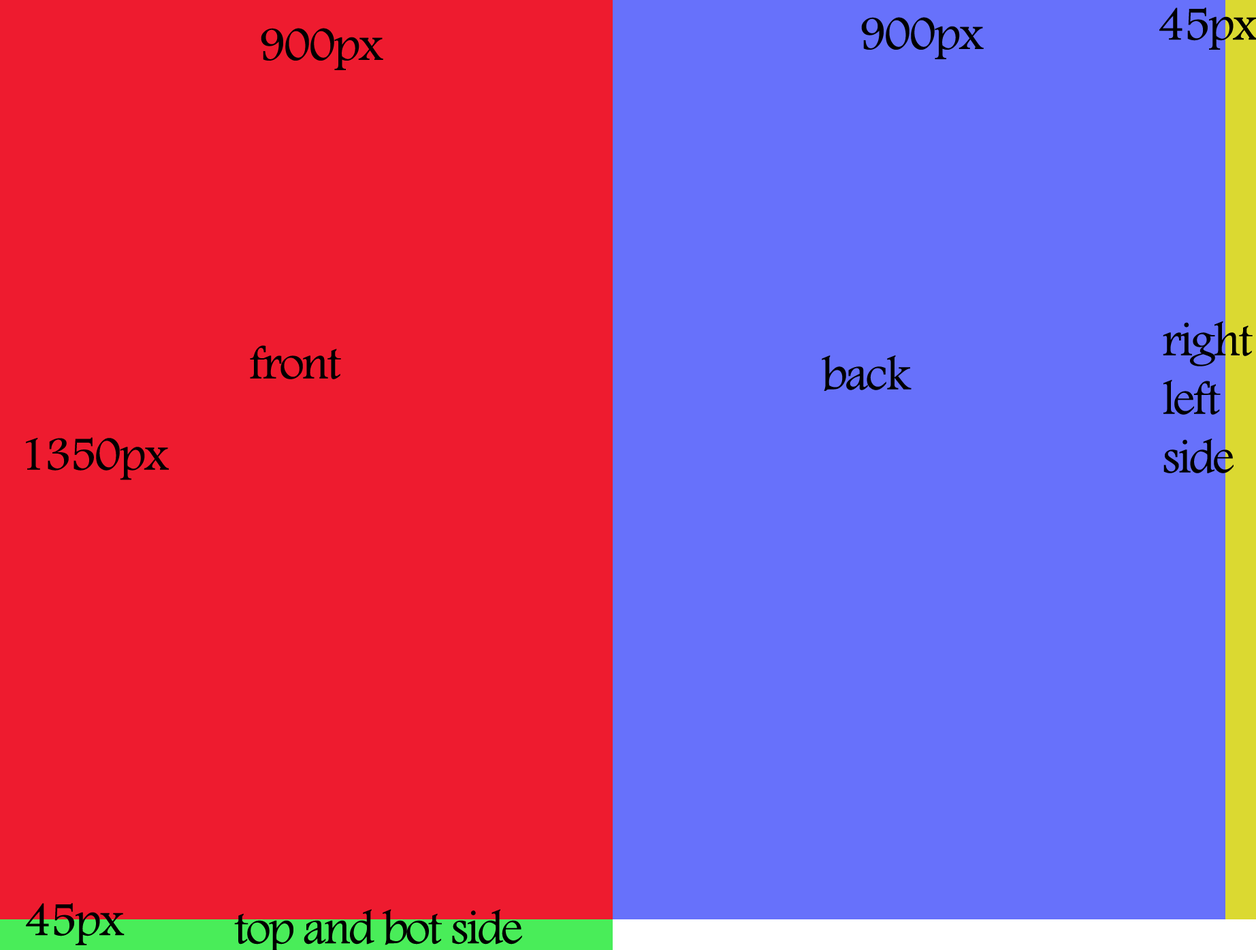
<style>
.page{position:relative;width:1256px;height:950px;background:#6771fb}
.page>*{position:absolute;margin:0}
.t1{font:49px "FootlightMTLight";letter-spacing:-0.04em;color:#000000}
.t2{font:49px/58.5px "FootlightMTLight";letter-spacing:-0.04em;color:#000000}
.t3{font:49px/13.6px "FootlightMTLight";letter-spacing:-0.04em;color:#000000}
</style>
<div class="page">
<p class="t1" style="left:861px;top:17px;width:123px;height:42px">900px</p>
<p class="t1" style="left:261px;top:28px;width:122px;height:42px">900px</p>
<p class="t2" style="left:1163px;top:321px;width:89px;height:152px"><span class="t3">righ</span>t<br>left<br>side</p>
<p class="t1" style="left:250px;top:345px;width:91px;height:34px">front</p>
<p class="t1" style="left:822px;top:355px;width:89px;height:36px">back</p>
<p class="t1" style="left:26px;top:437px;width:143px;height:43px">1350px</p>
<p class="t1" style="left:26px;top:903px;width:99px;height:42px">45px</p>
</div>
